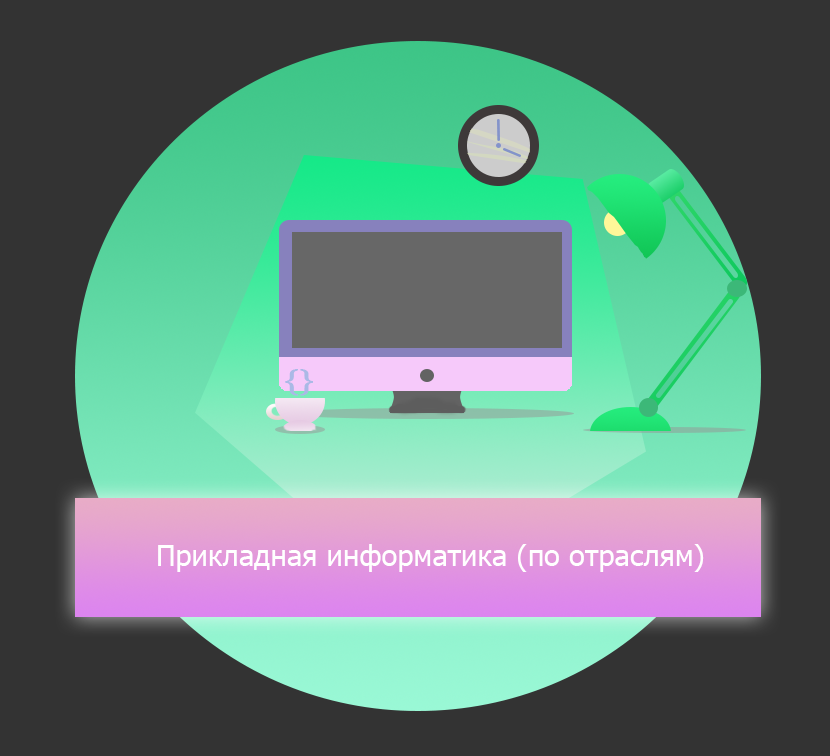
<style>
.page{position:relative;width:830px;height:756px;background:#333333}
.page>*{position:absolute;margin:0}
.t1{font:33.3px "SitkaHeading-Bold";color:#aab9e6}
.t2{font:29.2px "Tahoma";color:#ffffff}
</style>
<div class="page">
<p class="t1" style="left:285px;top:369px;width:28px;height:27px">{}</p>
<p class="t2" style="left:158px;top:544px;width:546px;height:28px">Прикладная информатика (по отраслям)</p>
</div>
